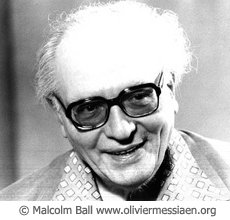
<style>
.page{position:relative;width:230px;height:220px}
.page>*{position:absolute;margin:0}
.t1{font:11px "Tahoma";color:#666666}
</style>
<div class="page">
<p class="t1" style="left:19px;top:205px;width:197px;height:12px">© Malcolm Ball www.oliviermessiaen.org</p>
</div>
